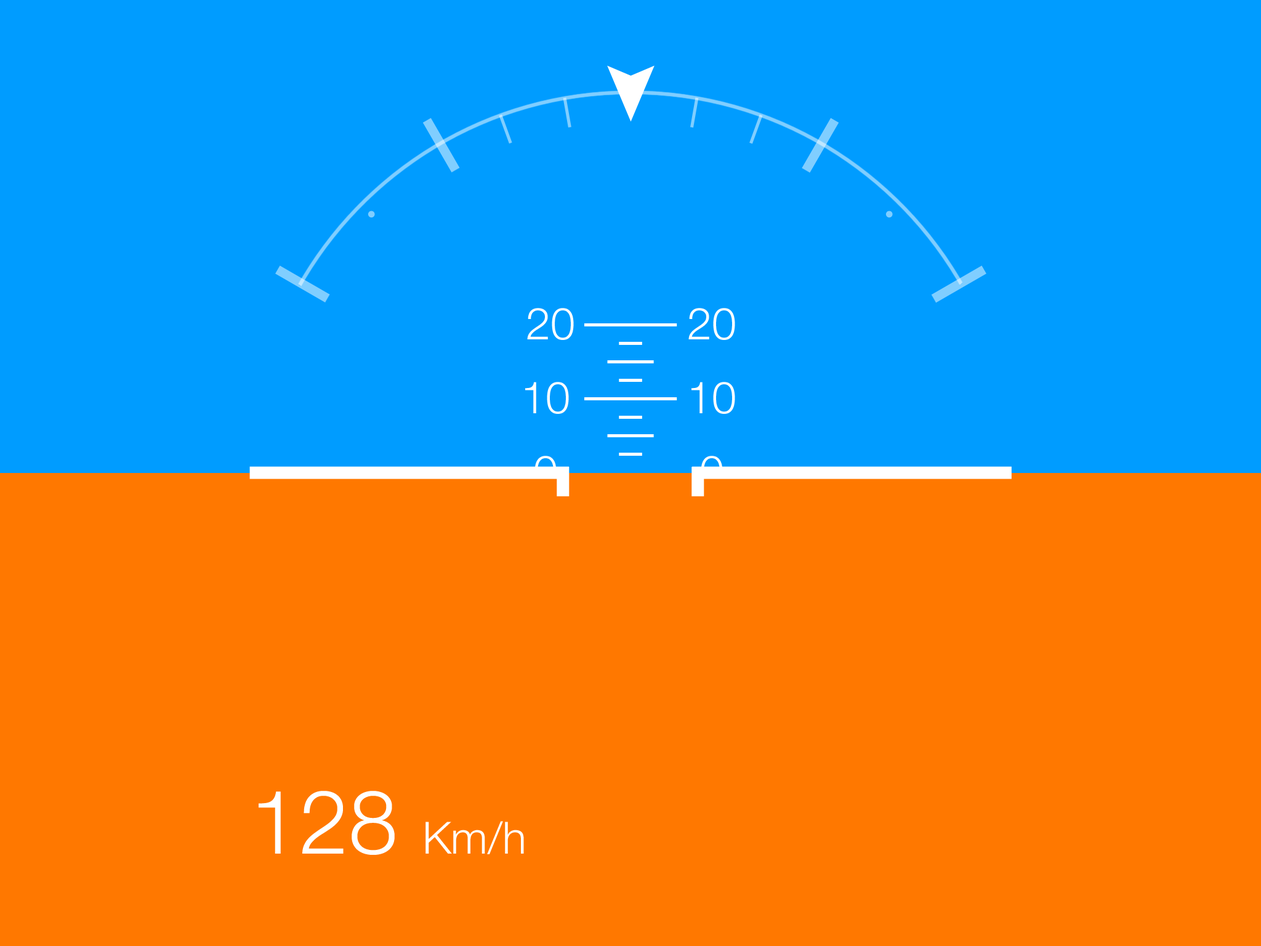
<style>
.page{position:relative;width:1261px;height:946px;background:#ff7800}
.page>*{position:absolute;margin:0}
.t1{font:44.3px "HelveticaNeue-Light";color:#ffffff}
.t2{font:88.7px "HelveticaNeue-Light";color:#ffffff}
</style>
<div class="page">
<p class="t1" style="left:527px;top:308px;width:47px;height:32px">20</p>
<p class="t1" style="left:688px;top:308px;width:47px;height:32px">20</p>
<p class="t1" style="left:525px;top:382px;width:44px;height:32px">10</p>
<p class="t1" style="left:691px;top:382px;width:44px;height:32px">10</p>
<p class="t1" style="left:259px;top:791px;width:265px;height:64px"><span class="t2">128 </span>Km/h</p>
</div>
